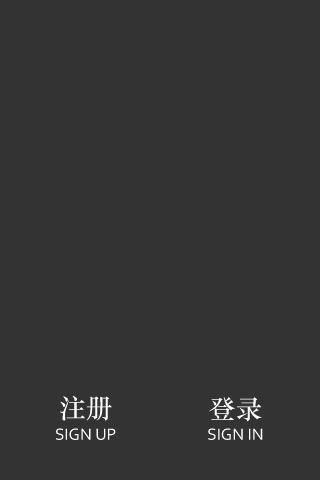
<style>
.page{position:relative;width:320px;height:480px;background:#333333}
.page>*{position:absolute;margin:0}
.t1{font:26.6px "STZhongsong";color:#ffffff;text-transform:uppercase}
.t2{font:17px "Corbel";color:#ffffff;text-transform:uppercase}
</style>
<div class="page">
<p class="t1" style="left:60px;top:395px;width:52px;height:26px">注册</p>
<p class="t1" style="left:209px;top:397px;width:53px;height:25px">登录</p>
<p class="t2" style="left:56px;top:428px;width:60px;height:12px">Sign up</p>
<p class="t2" style="left:208px;top:428px;width:55px;height:12px">sign IN</p>
</div>
